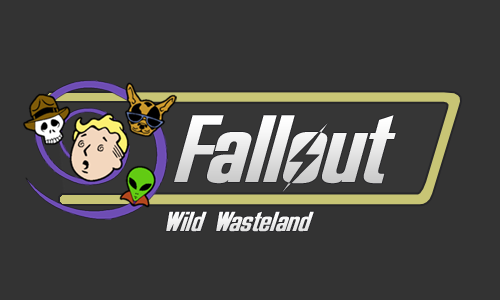
<style>
.page{position:relative;width:500px;height:300px;background:#333333}
.page>*{position:absolute;margin:0}
.t1{font:101.4px "Overseer";color:#e4e4e4;scale:0.96 1}
.t2{font:29.9px "Overseer";color:#ffffff;scale:0.95 1}
</style>
<div class="page">
<p class="t1" style="left:174px;top:115px;width:222px;height:77px">Fallout</p>
<p class="t2" style="left:166px;top:211px;width:148px;height:21px">Wild Wasteland</p>
</div>
